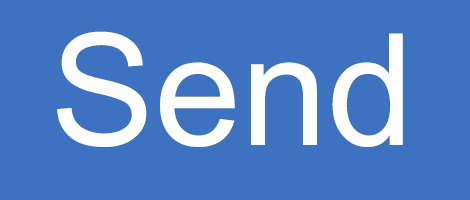
<style>
.page{position:relative;width:470px;height:200px;background:#3d72c1}
.page>*{position:absolute;margin:0}
.t1{font:155.5px "ArialUnicodeMS";color:#ffffff}
</style>
<div class="page">
<p class="t1" style="left:57px;top:31px;width:346px;height:116px">Send</p>
</div>
